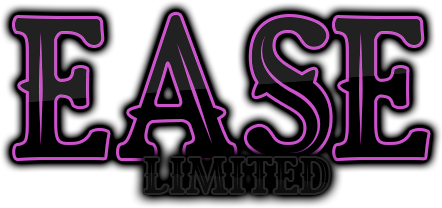
<style>
.page{position:relative;width:442px;height:208px;background:#000000}
.page>*{position:absolute;margin:0}
.t1{font:200px "RoyalKingFree"}
.t2{font:50px "RoyalKingFree";color:#000000}
</style>
<div class="page">
<p class="t1" style="left:14px;top:14px;width:414px;height:145px">EASE</p>
<p class="t2" style="left:144px;top:158px;width:185px;height:35px">LIMITED</p>
</div>
